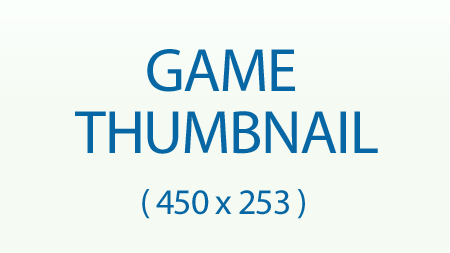
<style>
.page{position:relative;width:450px;height:253px;background:#f5faf3}
.page>*{position:absolute;margin:0}
.t1{font:61.6px/61.6px "MyriadPro-Regular";letter-spacing:-0.025em;color:#0767a4}
.t2{font:36px/61.6px "MyriadPro-Regular";letter-spacing:-0.025em;color:#0767a4}
</style>
<div class="page">
<p class="t1" style="left:75px;top:49px;width:303px;height:170px;text-align:center">GAME <br>THUMBNAIL<br><span class="t2">( 450 x 253 )</span></p>
</div>
